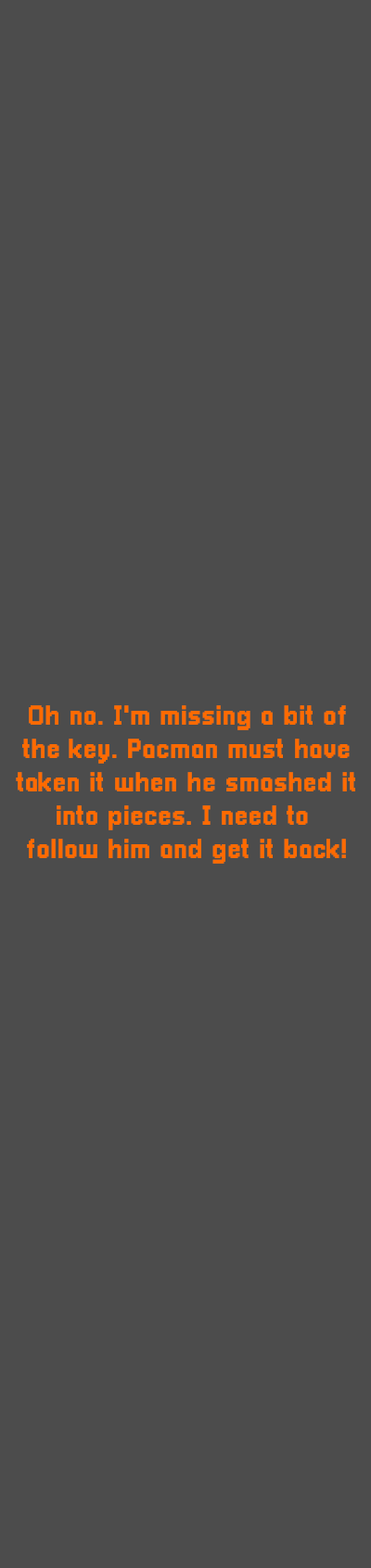
<style>
.page{position:relative;width:371px;height:1568px;background:#4c4c4c}
.page>*{position:absolute;margin:0}
.t1{font:27.8px "Pixellari";color:#ff6a00}
</style>
<div class="page">
<p class="t1" style="left:16px;top:705px;width:339px;height:159px;text-align:center">Oh no. I'm missing a bit of<br>the key. Pacman must have<br>taken it when he smashed it<br>into pieces. I need to <br>follow him and get it back!</p>
</div>
